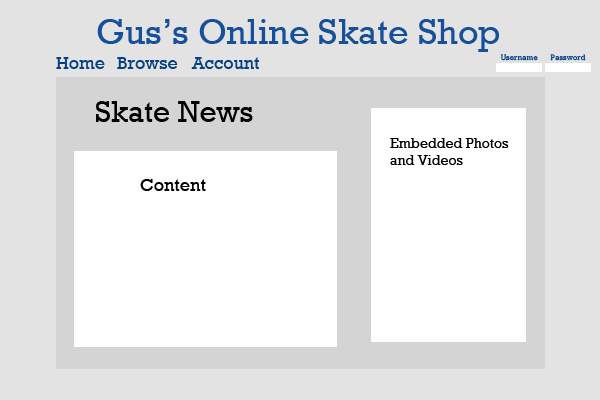
<style>
.page{position:relative;width:600px;height:400px;background:#e3e3e3}
.page>*{position:absolute;margin:0}
.t1{font:36px "Rockwell";color:#164f9b}
.t2{font:8px "Rockwell";color:#074085}
.t3{font:18px "Rockwell";color:#074085}
.t4{font:30px "Rockwell";color:#000000}
.t5{font:14px "Rockwell";color:#000000}
.t6{font:18px "Rockwell";color:#000000}
</style>
<div class="page">
<p class="t1" style="left:97px;top:19px;width:402px;height:33px">Gus’s Online Skate Shop</p>
<p class="t2" style="left:500px;top:54px;width:38px;height:7px">Username</p>
<p class="t2" style="left:550px;top:54px;width:36px;height:7px">Password</p>
<p class="t3" style="left:56px;top:57px;width:49px;height:12px">Home</p>
<p class="t3" style="left:117px;top:57px;width:61px;height:12px">Browse</p>
<p class="t3" style="left:191px;top:57px;width:68px;height:12px">Account</p>
<p class="t4" style="left:96px;top:101px;width:157px;height:21px">Skate News</p>
<p class="t5" style="left:390px;top:138px;width:119px;height:27px">Embedded Photos<br>and Videos</p>
<p class="t6" style="left:140px;top:179px;width:66px;height:12px">Content</p>
</div>
